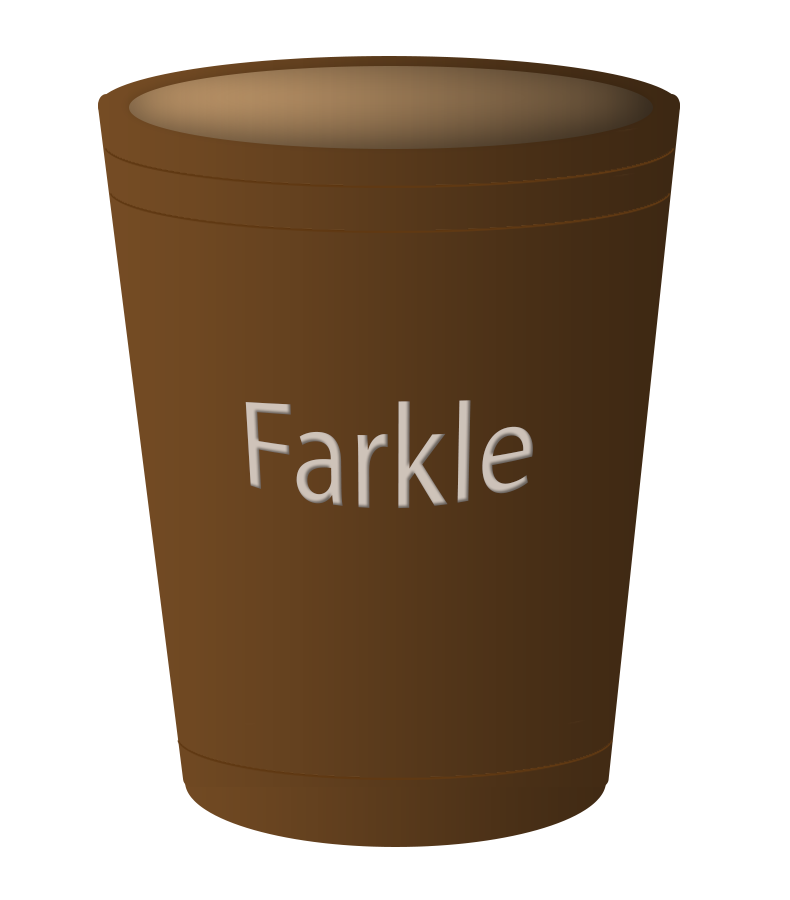
<style>
.page{position:relative;width:790px;height:900px;background:#ffffff}
.page>*{position:absolute;margin:0}
.t1{font:120px "MyriadPro-Regular";color:#d8cec5}
</style>
<div class="page">
<p class="t1" style="left:245px;top:400px;width:288px;height:109px;opacity:0.9">Farkle</p>
</div>
